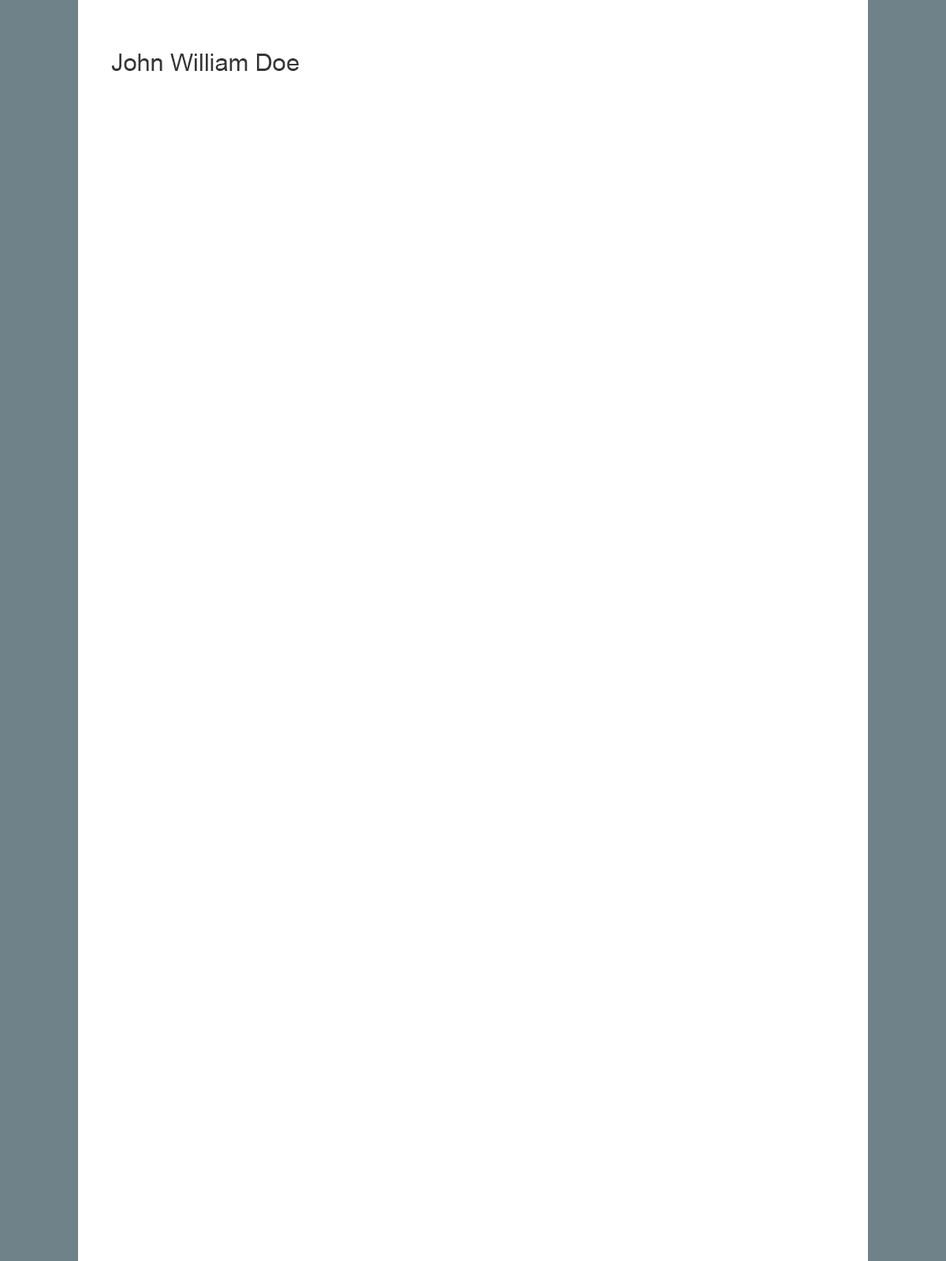
<style>
.page{position:relative;width:946px;height:1261px;background:#ffffff}
.page>*{position:absolute;margin:0}
.t1{font:24.2px "ArialMT";color:#363636}
</style>
<div class="page">
<p class="t1" style="left:111px;top:54px;width:188px;height:17px">John William Doe</p>
</div>
